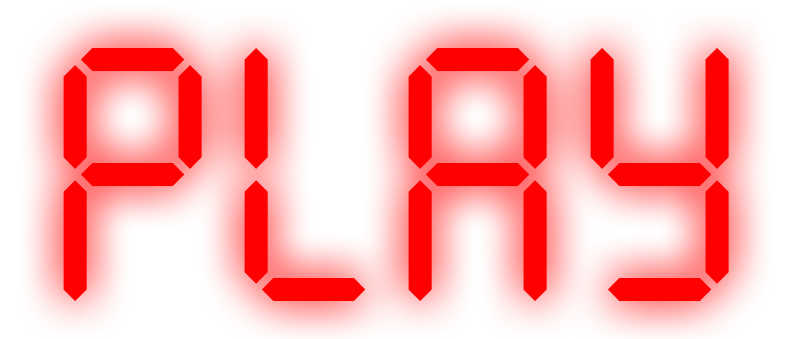
<style>
.page{position:relative;width:804px;height:339px}
.page>*{position:absolute;margin:0}
.t1{font:361.2px "SevenSegmentRegular";color:#ff0000}
</style>
<div class="page">
<p class="t1" style="left:63px;top:48px;width:666px;height:253px">Play</p>
</div>
